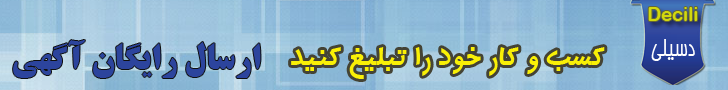
<style>
.page{position:relative;width:728px;height:90px}
.page>*{position:absolute;margin:0}
.t1{font:18.5px "ArialRoundedMTBold";color:#d2d90d}
.t2{font:36px "BTitrBold";color:#2c449d}
.t3{font:24px "BBardiya";color:#ffffff}
.t4{font:30px "BMehrBold";color:#f9f006}
</style>
<div class="page">
<p class="t1" style="left:648px;top:7px;width:50px;height:14px">Decili</p>
<p class="t2" style="left:13px;top:40px;width:248px;height:38px">ارسال رايگان آگهي</p>
<p class="t3" style="left:651px;top:39px;width:44px;height:22px">دسيلي</p>
<p class="t4" style="left:291px;top:47px;width:314px;height:32px">کسب و کار خود را تبليغ کنيد</p>
</div>
